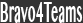
<style>
.page{position:relative;width:83px;height:23px;background:#333333}
.page>*{position:absolute;margin:0}
.t1{font:29.2px "MyanmarMN-Bold";color:#ffffff;scale:0.41 1}
</style>
<div class="page">
<p class="t1" style="left:0px;top:2px;width:83px;height:21px">Bravo4Teams</p>
</div>
